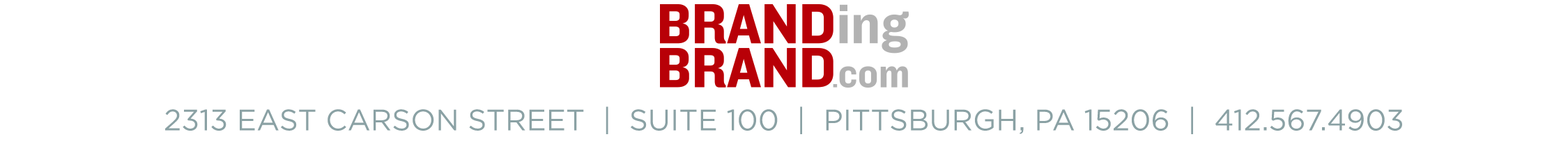
<style>
.page{position:relative;width:1568px;height:146px;background:#ffffff}
.page>*{position:absolute;margin:0}
.t1{font:29.6px "Gotham-Book";color:#8aa1a4;text-transform:uppercase}
</style>
<div class="page">
<p class="t1" style="left:165px;top:107px;width:1237px;height:27px">2313 East Carson Street  |  Suite 100  |  Pittsburgh, PA 15206  |  412.567.4903</p>
</div>
